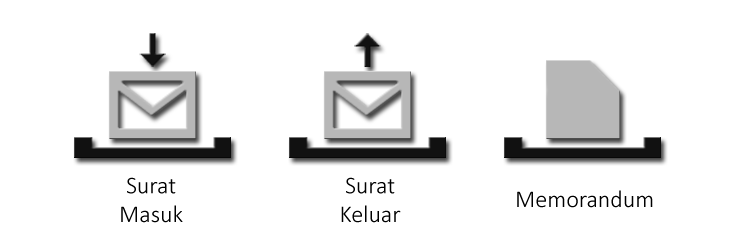
<style>
.page{position:relative;width:750px;height:250px;background:#ffffff}
.page>*{position:absolute;margin:0}
.t1{font:24px "Calibri-Light";color:#000000}
</style>
<div class="page">
<p class="t1" style="left:121px;top:177px;width:62px;height:46px;text-align:center">Surat<br>Masuk</p>
<p class="t1" style="left:341px;top:177px;width:60px;height:46px;text-align:center">Surat<br>Keluar</p>
<p class="t1" style="left:517px;top:190px;width:136px;height:18px">Memorandum</p>
</div>
